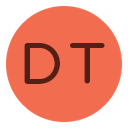
<style>
.page{position:relative;width:128px;height:128px;background:#f26c4f}
.page>*{position:absolute;margin:0}
.t1{font:60px "PollyRounded-Regular";color:#532015}
</style>
<div class="page">
<p class="t1" style="left:24px;top:43px;width:81px;height:41px">DT</p>
</div>
